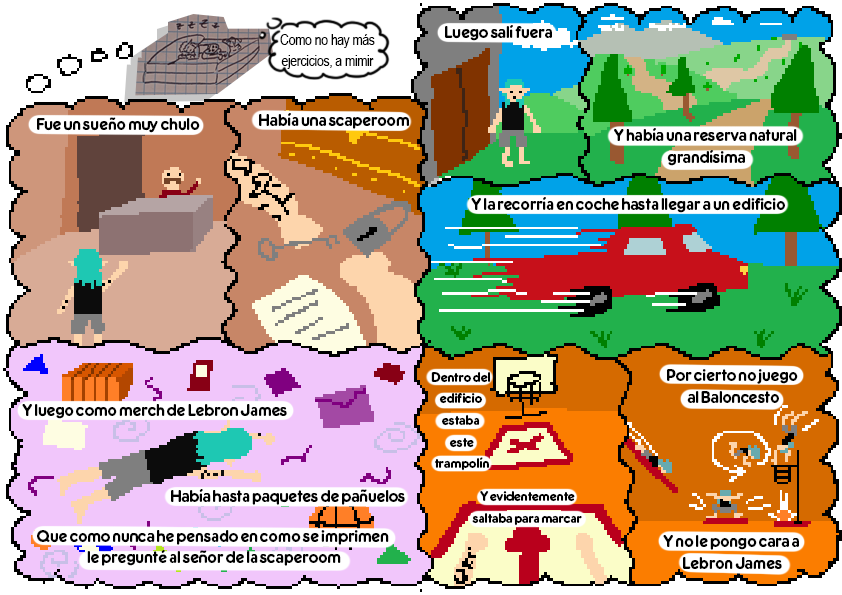
<style>
.page{position:relative;width:842px;height:595px}
.page>*{position:absolute;margin:0}
.t1{font:15px "OPTIFrankfurter-Medium";letter-spacing:-0.02em;color:#000000}
.t2{font:15px/21.6px "ArialNarrow";letter-spacing:-0.02em;color:#000000}
.t3{font:15px/21.6px "OPTIFrankfurter-Medium";letter-spacing:-0.02em;color:#000000}
.t4{font:12px/21.6px "OPTIFrankfurter-Medium";letter-spacing:-0.02em;color:#000000}
</style>
<div class="page">
<p class="t1" style="left:445px;top:25px;width:107px;height:16px">Luego salí fuera</p>
<p class="t2" style="left:280px;top:34px;width:95px;height:35px;text-align:center">Como no hay más<br>ejercicios, a mimir</p>
<p class="t1" style="left:259px;top:113px;width:150px;height:16px">Había una scaperoom</p>
<p class="t1" style="left:37px;top:117px;width:163px;height:16px">Fue un sueño muy chulo</p>
<p class="t3" style="left:614px;top:128px;width:183px;height:38px;text-align:center">Y había una reserva natural <br>grandísima</p>
<p class="t1" style="left:471px;top:197px;width:314px;height:16px">Y la recorría en coche hasta llegar a un edificio</p>
<p class="t4" style="left:431px;top:372px;width:60px;height:99px;text-align:center">Dentro del <br>edificio <br>estaba <br>este<br>trampolín</p>
<p class="t3" style="left:667px;top:369px;width:131px;height:34px;text-align:center">Por cierto no juego <br>al Baloncesto</p>
<p class="t1" style="left:22px;top:404px;width:265px;height:15px">Y luego como merch de Lebron James</p>
<p class="t1" style="left:171px;top:489px;width:234px;height:16px">Había hasta paquetes de pañuelos</p>
<p class="t4" style="left:472px;top:491px;width:110px;height:35px;text-align:center">Y evidentemente<br>saltaba para marcar</p>
<p class="t3" style="left:37px;top:530px;width:352px;height:36px;text-align:center">Que como nunca he pensado en como se imprimen <br>le pregunté al señor de la scaperoom</p>
<p class="t3" style="left:663px;top:535px;width:136px;height:34px;text-align:center">Y no le pongo cara a <br>Lebron James</p>
</div>
